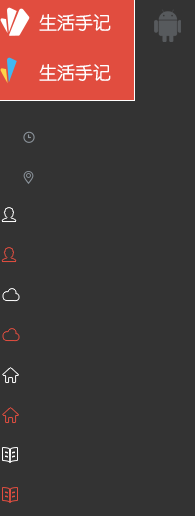
<style>
.page{position:relative;width:195px;height:516px;background:#333333}
.page>*{position:absolute;margin:0}
.t1{font:18px "STYuanti-SC-Regular";color:#ffffff}
</style>
<div class="page">
<p class="t1" style="left:39px;top:14px;width:72px;height:17px">生活手记</p>
<p class="t1" style="left:39px;top:64px;width:72px;height:17px">生活手记</p>
</div>
